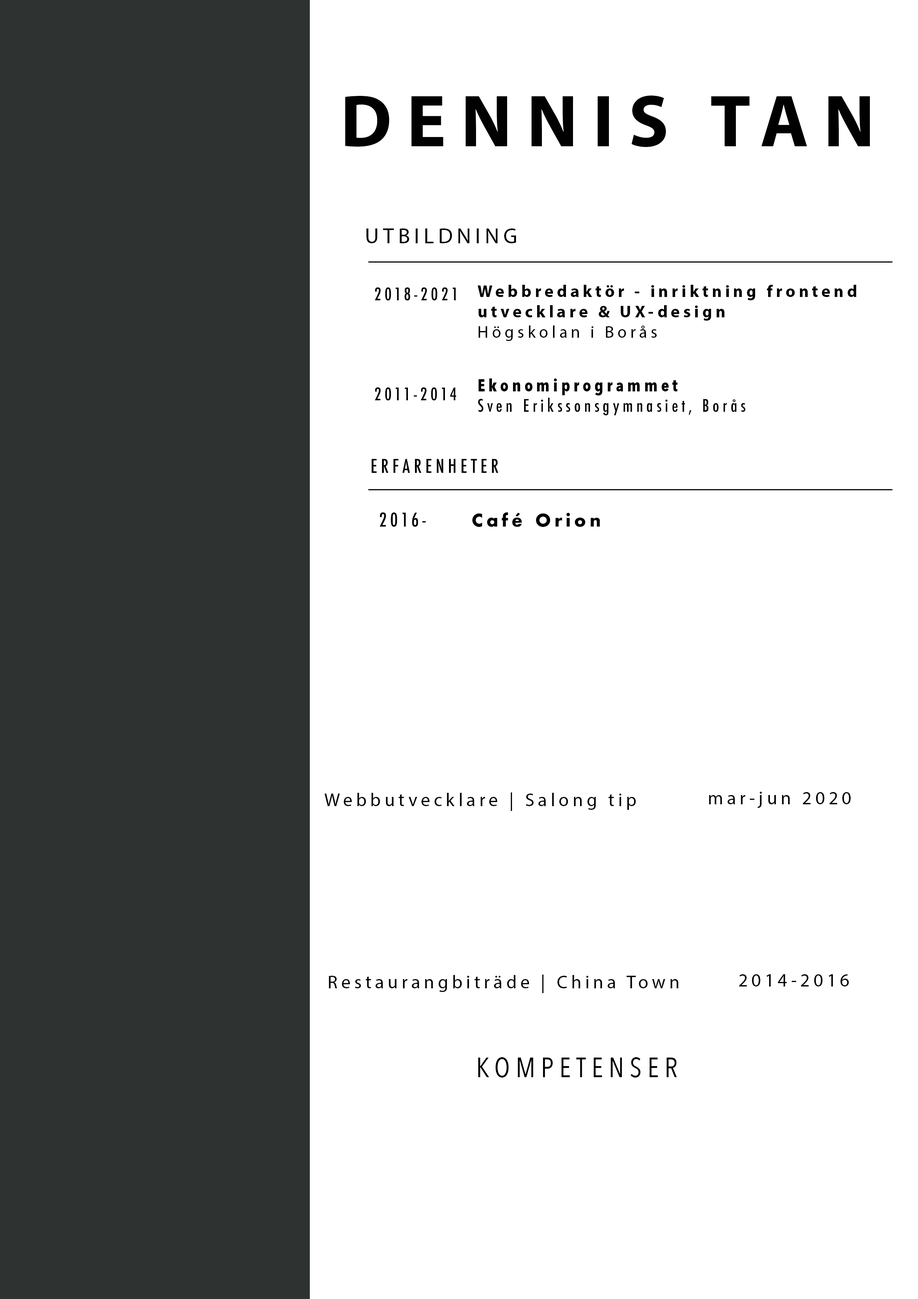
<style>
.page{position:relative;width:918px;height:1299px;background:#ffffff}
.page>*{position:absolute;margin:0}
.t1{font:74px "MyriadPro-Bold";letter-spacing:0.2em;color:#010101}
.t2{font:21.6px "MyriadPro-Regular";letter-spacing:0.2em;color:#010101}
.t3{font:17px "Futura-CondensedMedium";letter-spacing:0.2em;color:#010101}
.t4{font:17px "MyriadPro-Bold";letter-spacing:0.2em;color:#000000}
.t5{font:17px "MyriadPro-Regular";letter-spacing:0.2em;color:#000000}
.t6{font:17px "Futura-CondensedMedium";letter-spacing:0.2em;color:#000000}
.t7{font:17px "AvenirNextCondensed-Bold";letter-spacing:0.2em;color:#000000}
.t8{font:18.5px "Futura-CondensedMedium";letter-spacing:0.2em;color:#010101}
.t9{font:18.5px "Futura-CondensedMedium";letter-spacing:0.2em;color:#000000}
.t10{font:17px "Futura-Bold";letter-spacing:0.2em;color:#000000}
.t11{font:18.5px "MyriadPro-Regular";letter-spacing:0.2em;color:#000000}
.t12{font:27.8px "AvenirNextCondensed-Regular";letter-spacing:0.2em;color:#010101}
</style>
<div class="page">
<p class="t1" style="left:345px;top:96px;width:525px;height:51px">DENNIS TAN</p>
<p class="t2" style="left:367px;top:228px;width:149px;height:15px">UTBILDNING</p>
<p class="t3" style="left:375px;top:287px;width:81px;height:14px">2018-2021</p>
<p class="t4" style="left:478px;top:285px;width:379px;height:56px">Webbredaktör - inriktning frontend utvecklare &amp; UX-design<br><span class="t5">Högskolan i Borås</span></p>
<p class="t6" style="left:375px;top:387px;width:81px;height:14px">2011-2014</p>
<p class="t6" style="left:478px;top:378px;width:268px;height:37px"><span class="t7">Ekonomiprogrammet<br></span>Sven Erikssonsgymnasiet, Borås</p>
<p class="t8" style="left:372px;top:459px;width:126px;height:14px">ERFARENHETER</p>
<p class="t9" style="left:380px;top:512px;width:46px;height:15px">2016-</p>
<p class="t10" style="left:472px;top:512px;width:128px;height:15px">Café Orion</p>
<p class="t11" style="left:324px;top:792px;width:312px;height:19px">Webbutvecklare | Salong tip</p>
<p class="t11" style="left:709px;top:792px;width:142px;height:16px">mar-jun 2020</p>
<p class="t11" style="left:329px;top:974px;width:350px;height:19px">Restaurangbiträde | China Town</p>
<p class="t12" style="left:478px;top:1057px;width:199px;height:20px">KOMPETENSER</p>
</div>
